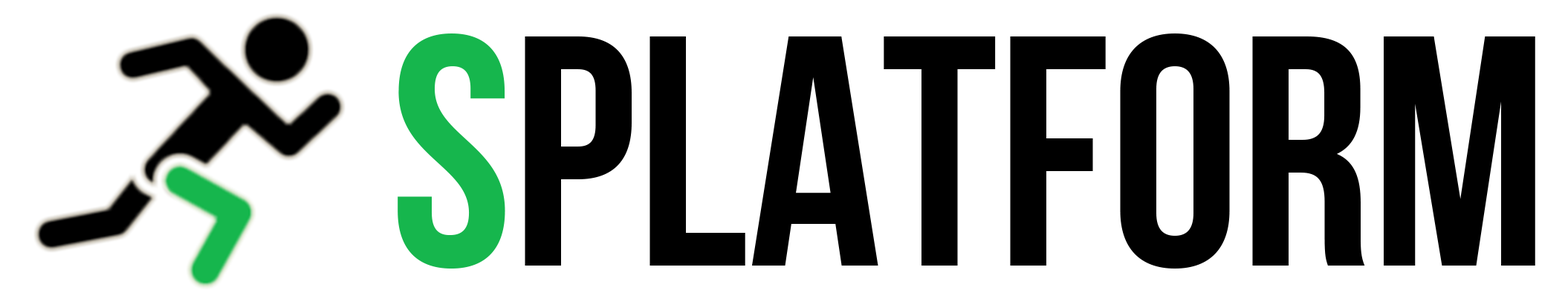
<style>
.page{position:relative;width:1568px;height:302px;background:#ffffff}
.page>*{position:absolute;margin:0}
.t1{font:327.1px "BebasNeueBold";color:#000000}
.t2{font:327.1px "BebasNeueBold";color:#16b64d}
</style>
<div class="page">
<p class="t1" style="left:398px;top:33px;width:1137px;height:236px"><span class="t2">S</span>PLATFORM</p>
</div>
